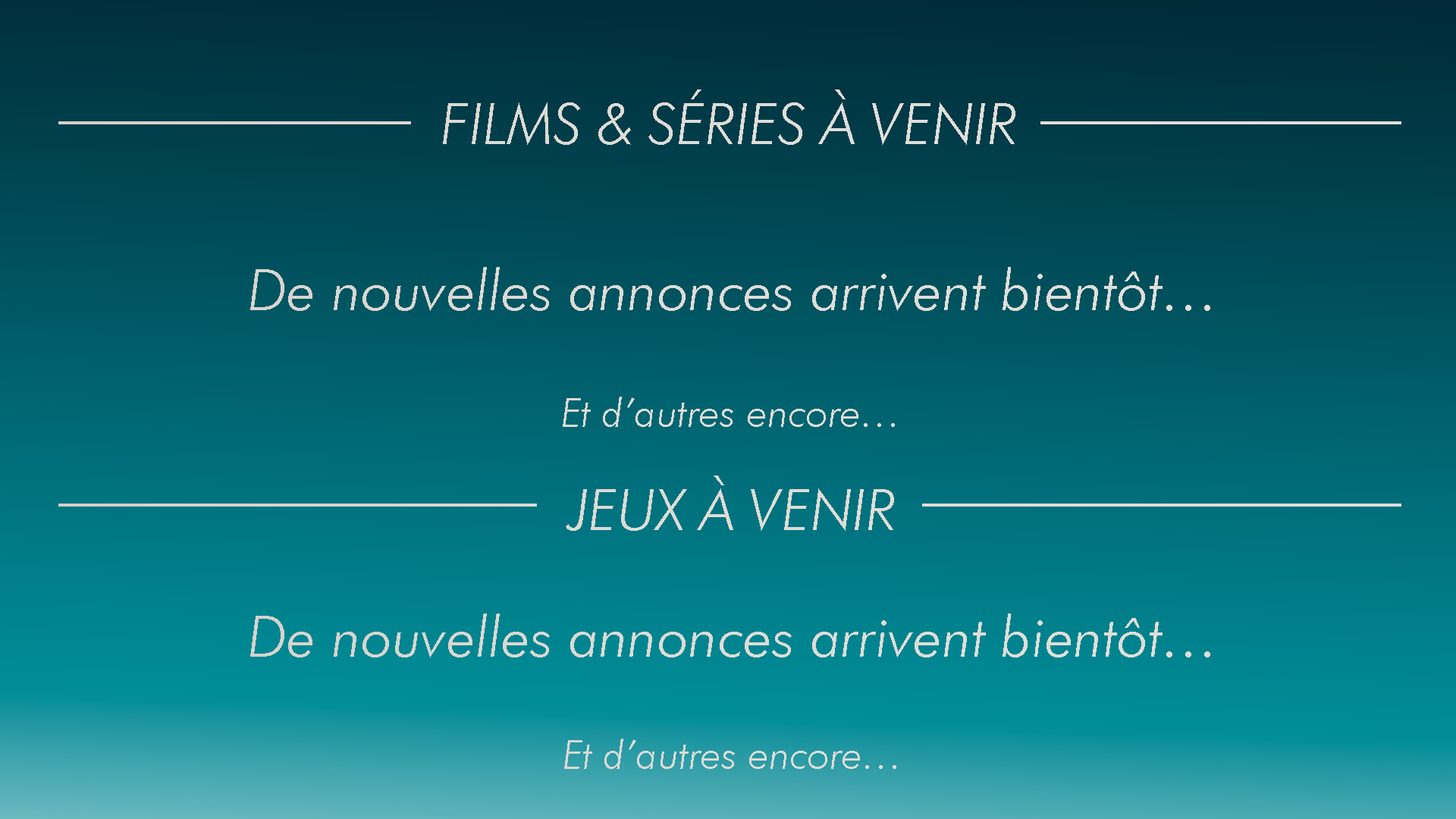
<style>
.page{position:relative;width:1456px;height:819px}
.page>*{position:absolute;margin:0}
.t1{font:56.9px "FuturaBT-LightItalic";color:#deddd8}
.t2{font:56.9px "FuturaBT-LightItalic";color:#dddcd7}
.t3{font:40.2px "FuturaBT-LightItalic";color:#dddcd7}
.t4{font:56.9px "FuturaBT-LightItalic";color:#dcdbd6}
.t5{font:40.2px "FuturaBT-LightItalic";color:#dcdbd6}
</style>
<div class="page">
<p class="t1" style="left:443px;top:89px;width:572px;height:56px">FILMS &amp; SÉRIES À VENIR</p>
<p class="t2" style="left:250px;top:267px;width:960px;height:44px">De nouvelles annonces arrivent bientôt…</p>
<p class="t3" style="left:563px;top:397px;width:332px;height:30px">Et d’autres encore…</p>
<p class="t2" style="left:566px;top:475px;width:328px;height:56px">JEUX À VENIR</p>
<p class="t4" style="left:250px;top:613px;width:960px;height:44px">De nouvelles annonces arrivent bientôt…</p>
<p class="t5" style="left:564px;top:739px;width:332px;height:30px">Et d’autres encore…</p>
</div>
